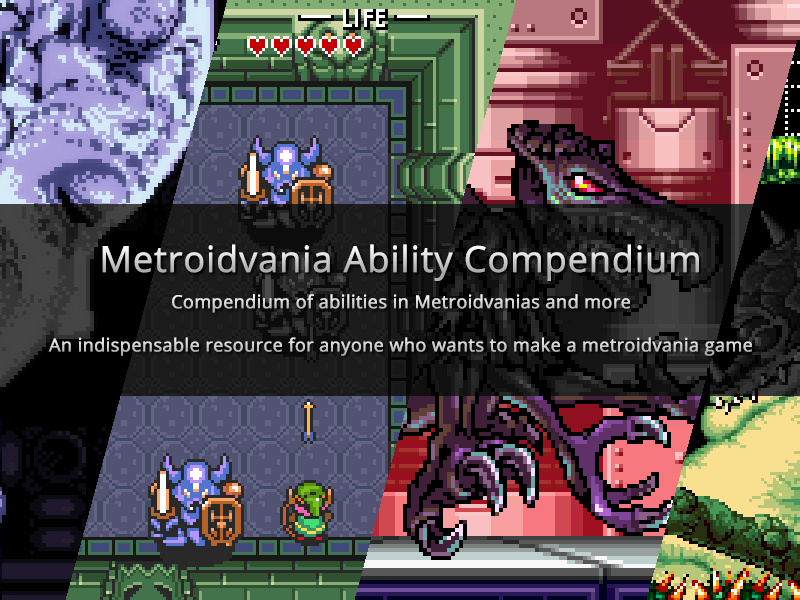
<style>
.page{position:relative;width:800px;height:600px}
.page>*{position:absolute;margin:0}
.t1{font:18px "OpenSans";font-weight:bold}
.t2{font:36px "OpenSans";font-weight:bold}
</style>
<div class="page">
<p class="t1" style="left:48px;top:244px;width:704px;height:112px;text-align:center"><span class="t2">Metroidvania Ability Compendium<br><br></span>Compendium of abilities in Metroidvanias and more<br><br>An indispensable resource for anyone who wants to make a metroidvania game</p>
</div>
